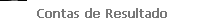
<style>
.page{position:relative;width:224px;height:27px;background:#ffffff}
.page>*{position:absolute;margin:0}
.t1{font:11.2px "Tahoma";color:#797979;font-weight:bold}
</style>
<div class="page">
<p class="t1" style="left:37px;top:8px;width:130px;height:10px">Contas de Resultado</p>
</div>
